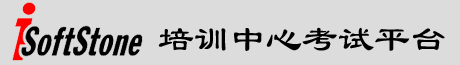
<style>
.page{position:relative;width:460px;height:65px;background:#dcdcdc}
.page>*{position:absolute;margin:0}
.t1{font:36px "LiSu";color:#000000}
</style>
<div class="page">
<p class="t1" style="left:158px;top:27px;width:287px;height:24px">培训中心考试平台</p>
</div>
